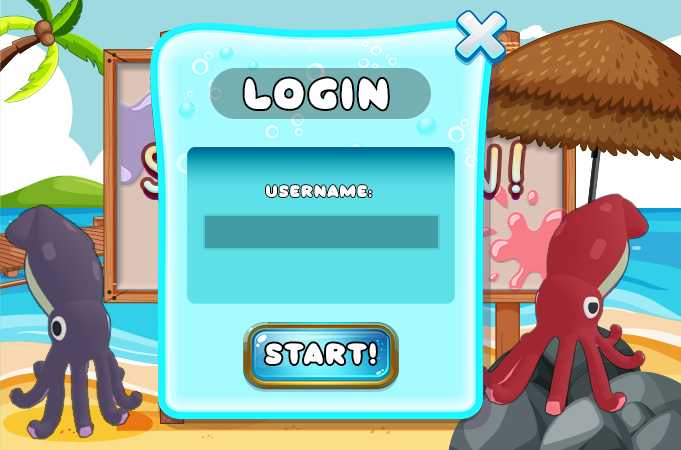
<style>
.page{position:relative;width:681px;height:450px}
.page>*{position:absolute;margin:0}
.t1{font:43.6px "BrocilRegular";letter-spacing:0.1em;color:#ffffff}
.t2{font:16.7px "BrocilRegular";letter-spacing:0.1em;color:#ffffff}
.t3{font:29.2px "BrocilRegular";letter-spacing:0.1em;color:#ffffff}
</style>
<div class="page">
<p class="t1" style="left:244px;top:78px;width:144px;height:32px">LOGIN</p>
<p class="t2" style="left:266px;top:185px;width:106px;height:12px">USERNAME:</p>
<p class="t3" style="left:265px;top:343px;width:111px;height:21px">START!</p>
</div>
